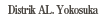
<style>
.page{position:relative;width:106px;height:19px;background:#ffffff}
.page>*{position:absolute;margin:0}
.t1{font:12px "RyuminPro-ExBold";letter-spacing:-0.08em;color:#4c4843;scale:0.85 1}
</style>
<div class="page">
<p class="t1" style="left:8px;top:5px;width:91px;height:10px">Distrik AL. Yokosuka</p>
</div>
